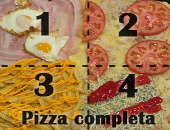
<style>
.page{position:relative;width:170px;height:130px}
.page>*{position:absolute;margin:0}
.t1{font:35px "BritannicBold";color:#1c1814;text-transform:uppercase;font-weight:bold}
.t2{font:35px "BritannicBold";color:#1a100a;text-transform:uppercase;font-weight:bold}
.t3{font:22px "ArialMT";color:#251a0b;text-transform:uppercase}
.t4{font:35px "BritannicBold";color:#1c1302;text-transform:uppercase;font-weight:bold}
.t5{font:35px "BritannicBold";color:#000000;text-transform:uppercase;font-weight:bold}
.t6{font:19.3px "BritannicBold";color:#181408;font-weight:bold}
</style>
<div class="page">
<p class="t1" style="left:36px;top:12px;width:13px;height:24px">1</p>
<p class="t2" style="left:118px;top:13px;width:20px;height:24px">2</p>
<p class="t3" style="left:1px;top:65px;width:168px;height:2px">- - - - - - - - - - - - -</p>
<p class="t4" style="left:34px;top:73px;width:20px;height:24px">3</p>
<p class="t5" style="left:118px;top:74px;width:20px;height:24px;opacity:0.85">4</p>
<p class="t6" style="left:22px;top:111px;width:134px;height:17px">Pizza completa</p>
</div>
